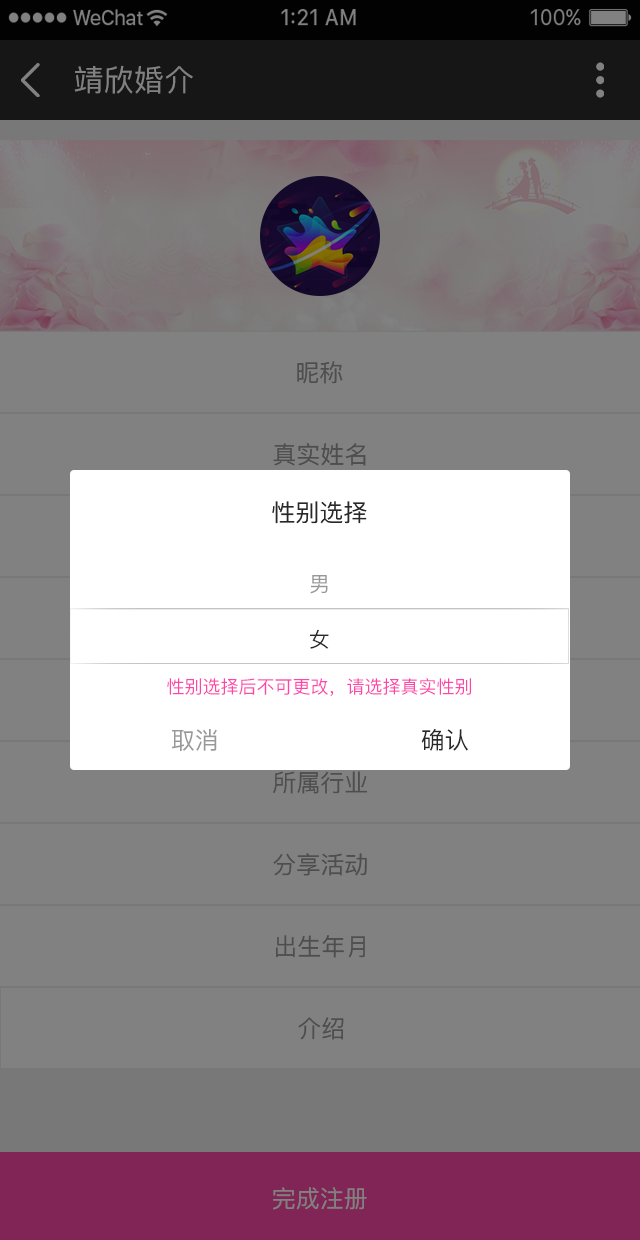
<style>
.page{position:relative;width:640px;height:1240px;background:#818181}
.page>*{position:absolute;margin:0}
.t1{font:30px "PingFang-SC-Medium";letter-spacing:0.01em;color:#818181;text-transform:uppercase}
.t2{font:24px "PingFang-SC-Medium";color:#4e4e4e;text-transform:uppercase}
.t3{font:24px "PingFang-SC-Medium";color:#282828;text-transform:uppercase}
.t4{font:20.8px "PingFang-SC-Medium";color:#989898}
.t5{font:20.8px "PingFang-SC-Medium";color:#282828}
.t6{font:18px "PingFang-SC-Medium";color:#ff45a8}
.t7{font:23.8px "PingFang-SC-Medium";color:#989898;text-transform:uppercase}
.t8{font:23.8px "PingFang-SC-Medium";color:#282828;text-transform:uppercase}
.t9{font:24px "PingFang-SC-Medium";color:#818181;text-transform:uppercase}
</style>
<div class="page">
<p class="t1" style="left:74px;top:65px;width:119px;height:29px">靖欣婚介</p>
<p class="t2" style="left:297px;top:361px;width:46px;height:23px">昵称</p>
<p class="t2" style="left:273px;top:443px;width:93px;height:23px">真实姓名</p>
<p class="t3" style="left:272px;top:501px;width:95px;height:23px">性别选择</p>
<p class="t4" style="left:310px;top:575px;width:18px;height:19px">男</p>
<p class="t5" style="left:310px;top:629px;width:19px;height:20px">女</p>
<p class="t6" style="left:167px;top:678px;width:304px;height:18px">性别选择后不可更改，请选择真实性别</p>
<p class="t7" style="left:172px;top:729px;width:45px;height:22px">取消</p>
<p class="t8" style="left:421px;top:729px;width:47px;height:22px">确认</p>
<p class="t2" style="left:273px;top:771px;width:94px;height:23px">所属行业</p>
<p class="t2" style="left:273px;top:853px;width:94px;height:23px">分享活动</p>
<p class="t2" style="left:276px;top:935px;width:89px;height:23px">出生年月</p>
<p class="t2" style="left:298px;top:1017px;width:46px;height:23px">介绍</p>
<p class="t9" style="left:273px;top:1187px;width:94px;height:23px">完成注册</p>
</div>
